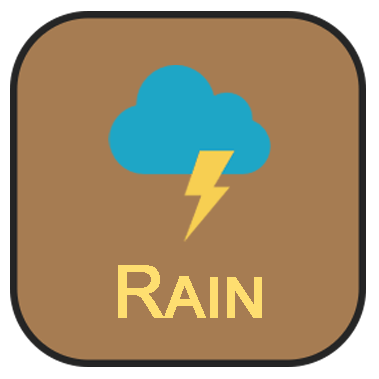
<style>
.page{position:relative;width:379px;height:379px;background:#a67c52}
.page>*{position:absolute;margin:0}
.t1{font:71.9px "ArialMT";letter-spacing:-0.025em;color:#fede70;font-variant:small-caps;font-weight:bold}
</style>
<div class="page">
<p class="t1" style="left:118px;top:265px;width:144px;height:53px">Rain</p>
</div>
